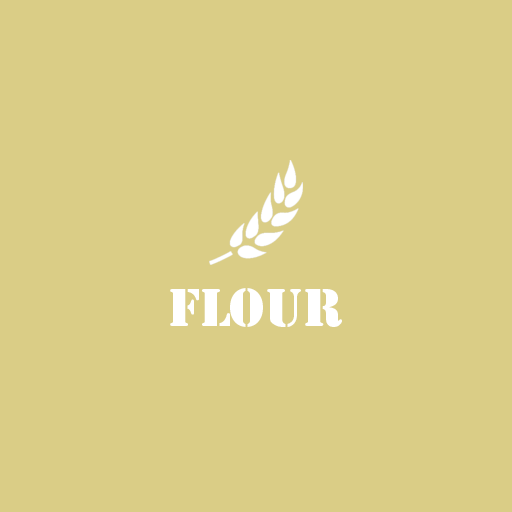
<style>
.page{position:relative;width:512px;height:512px;background:#dacd86}
.page>*{position:absolute;margin:0}
.t1{font:50px "StencilStd";color:#ffffff}
</style>
<div class="page">
<p class="t1" style="left:170px;top:288px;width:172px;height:39px">Flour</p>
</div>
